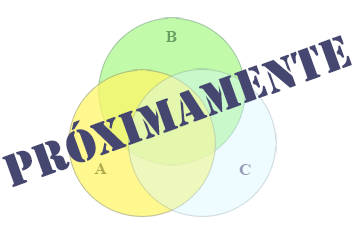
<style>
.page{position:relative;width:356px;height:234px;background:#ffffff}
.page>*{position:absolute;margin:0}
.t1{font:47.8px "Stencil";color:#464771}
.t2{font:17.1px "TimesNewRomanPS-BoldMT";color:#68a165}
.t3{font:17.1px "TimesNewRomanPS-BoldMT";color:#b1ab4e}
.t4{font:17.1px "TimesNewRomanPS-BoldMT";color:#949db5}
</style>
<div class="page">
<p class="t1" style="left:2px;top:35px;width:350px;height:152px;rotate:-20deg">PRÓXIMAMENTE</p>
<p class="t2" style="left:166px;top:31px;width:11px;height:11px">B</p>
<p class="t3" style="left:94px;top:163px;width:13px;height:11px">A</p>
<p class="t4" style="left:239px;top:164px;width:12px;height:11px">C</p>
</div>
